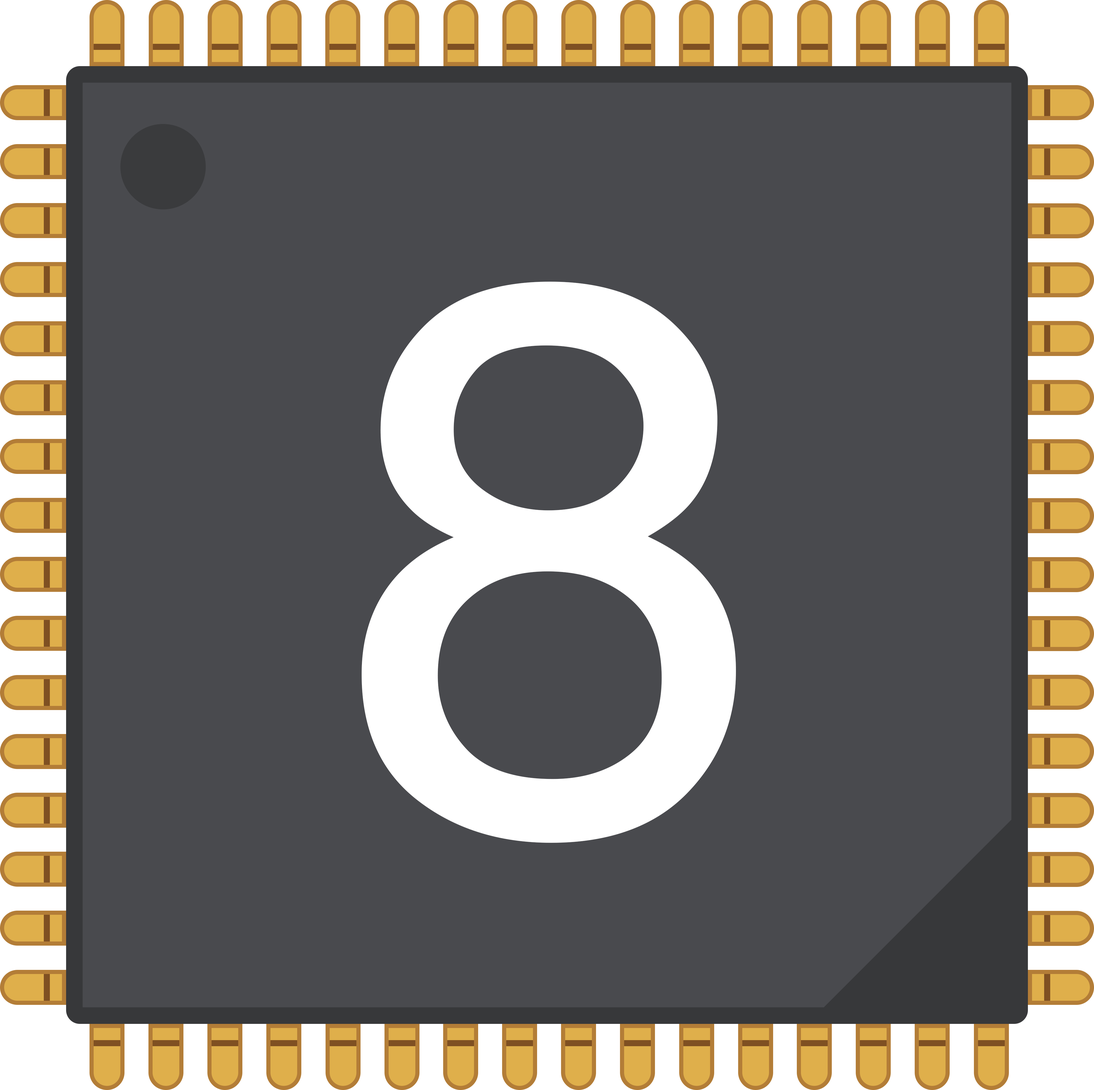
<style>
.page{position:relative;width:1094px;height:1090px;background:#494a4e}
.page>*{position:absolute;margin:0}
.t1{font:776px "Helvetica";color:#ffffff;font-weight:bold}
</style>
<div class="page">
<p class="t1" style="left:362px;top:282px;width:374px;height:561px">8</p>
</div>
